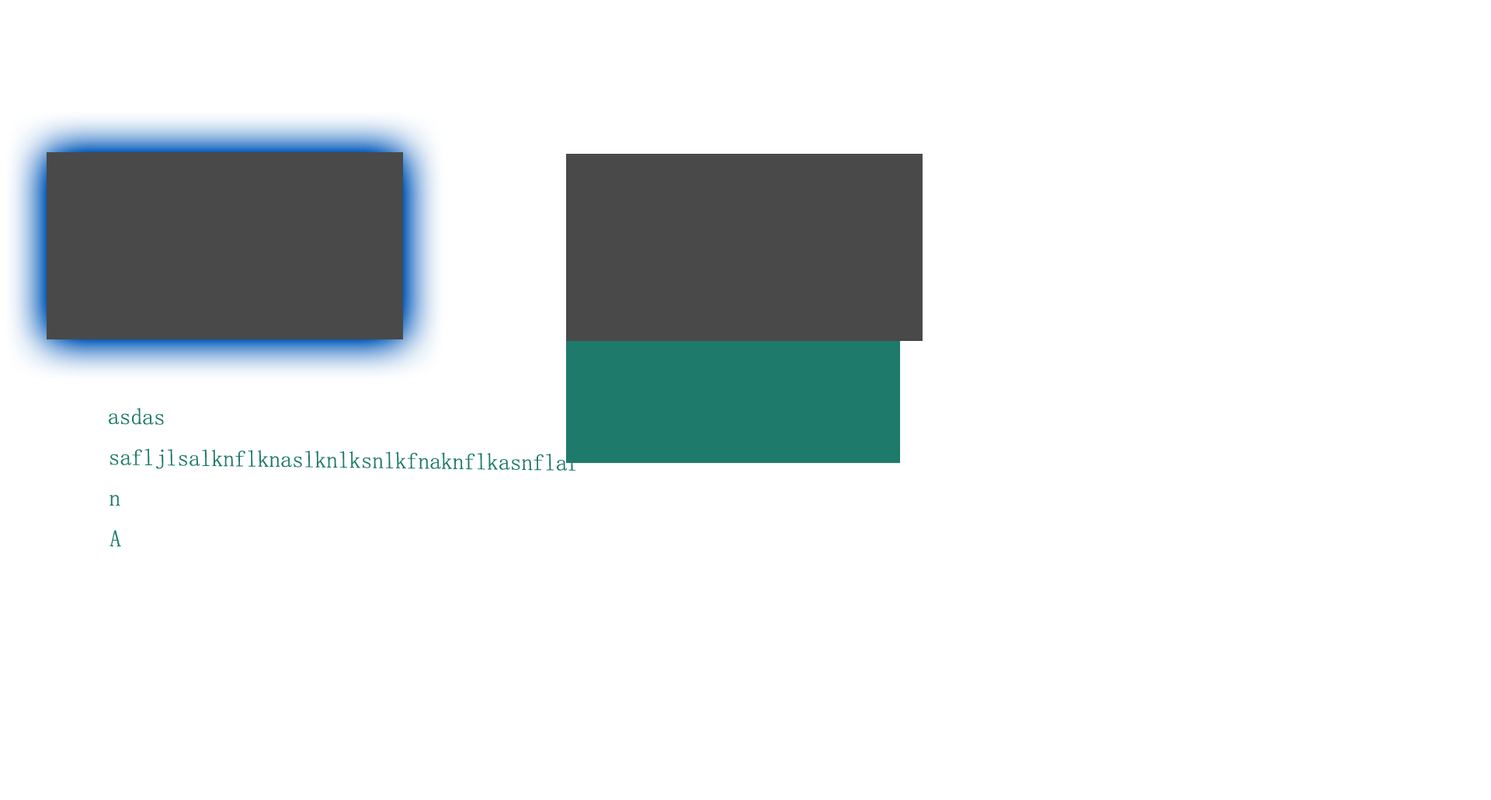
<style>
.page{position:relative;width:1491px;height:800px;background:#ffffff}
.page>*{position:absolute;margin:0}
.t1{font:23.3px "SimSun";color:#1e7a6a}
</style>
<div class="page">
<p class="t1" style="left:109px;top:408px;width:470px;height:139px;rotate:1deg">asdas     safljlsalknflknaslknlksnlkfnaknflkasnflafn<br>A</p>
</div>
